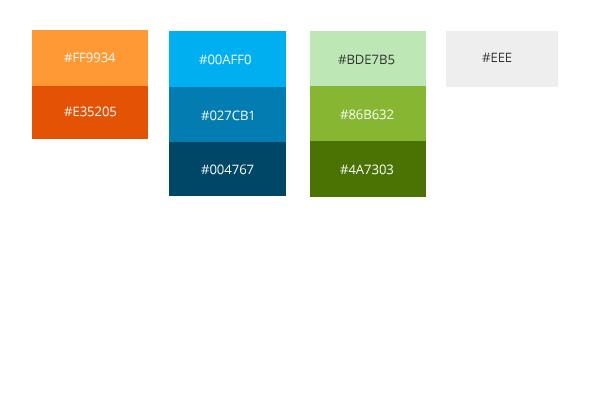
<style>
.page{position:relative;width:600px;height:399px;background:#ffffff}
.page>*{position:absolute;margin:0}
.t1{font:13px "OpenSans";color:#ffffff}
.t2{font:13px "OpenSans";color:#333333}
</style>
<div class="page">
<p class="t1" style="left:64px;top:52px;width:52px;height:11px">#FF9934</p>
<p class="t1" style="left:199px;top:54px;width:52px;height:11px">#00AFF0</p>
<p class="t2" style="left:338px;top:54px;width:57px;height:11px">#BDE7B5</p>
<p class="t2" style="left:482px;top:52px;width:30px;height:10px">#EEE</p>
<p class="t1" style="left:64px;top:106px;width:52px;height:11px">#E35205</p>
<p class="t1" style="left:201px;top:110px;width:52px;height:11px">#027CB1</p>
<p class="t1" style="left:340px;top:109px;width:54px;height:11px">#86B632</p>
<p class="t1" style="left:201px;top:164px;width:53px;height:11px">#004767</p>
<p class="t1" style="left:340px;top:164px;width:53px;height:11px">#4A7303</p>
</div>
